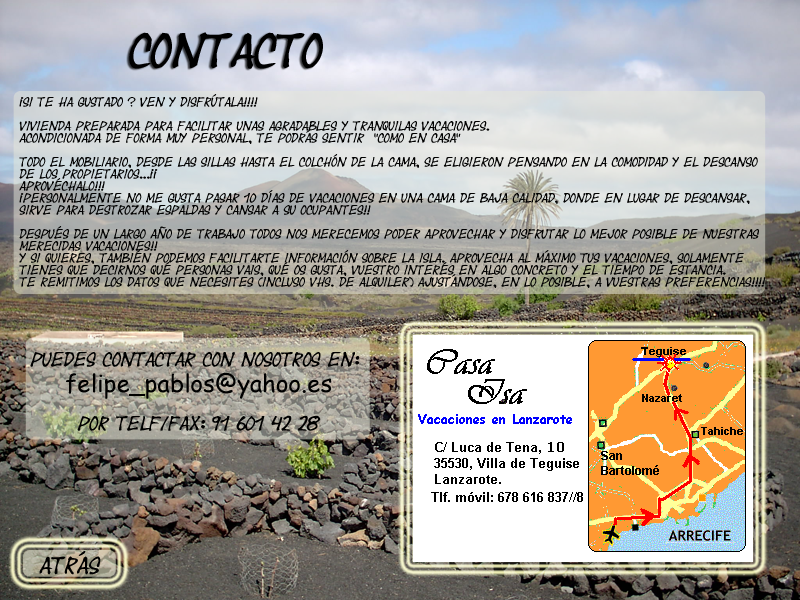
<style>
.page{position:relative;width:800px;height:600px}
.page>*{position:absolute;margin:0}
.t1{font:36px "Yearsupplyoffairycakes";color:#000000}
.t2{font:10px "Yearsupplyoffairycakes";color:#000000}
.t3{font:15px "Yearsupplyoffairycakes";color:#000000}
.t4{font:24px "ComicSansMS";color:#000000}
.t5{font:18px "Yearsupplyoffairycakes";color:#000000}
</style>
<div class="page">
<p class="t1" style="left:129px;top:32px;width:194px;height:37px">Contacto</p>
<p class="t2" style="left:19px;top:94px;width:747px;height:194px">¡Si te ha gustado … ven y disfrútala!!!! <br><br>Vivienda preparada para facilitar unas agradables y tranquilas vacaciones.<br>Acondicionada de forma muy personal, te podrás sentir  “como en casa”<br><br>Todo el mobiliario, desde las sillas hasta el colchón de la cama, se eligieron pensando en la comodidad y el descanso <br>de los propietarios...¡¡<br>APROVÉCHALO!!!<br>¡Personalmente no me gusta pasar 10 días de vacaciones en una cama de baja calidad, donde en lugar de descansar, <br>sirve para destrozar espaldas y cansar a su ocupantes!! <br><br>Después de un largo año de trabajo todos nos merecemos poder aprovechar y disfrutar lo mejor posible de nuestras <br>merecidas vacaciones!!<br>Y si quieres, también podemos facilitarte información sobre la Isla. Aprovecha al máximo tus vacaciones, solamente <br>tienes que decirnos qué personas vais, qué os gusta, vuestro interés en algo concreto y el tiempo de estancia.<br>Te remitimos los datos que necesites (incluso vhs. de alquiler) ajustándose, en lo posible, a vuestras preferencias!!!!</p>
<p class="t3" style="left:30px;top:352px;width:330px;height:79px;text-align:center">Puedes contactar con nosotros en: <br><span class="t4">felipe_pablos@yahoo.es<br></span> <br>Por telf/fax: 91 601 42 28</p>
<p class="t5" style="left:39px;top:551px;width:62px;height:24px">atrás</p>
</div>
